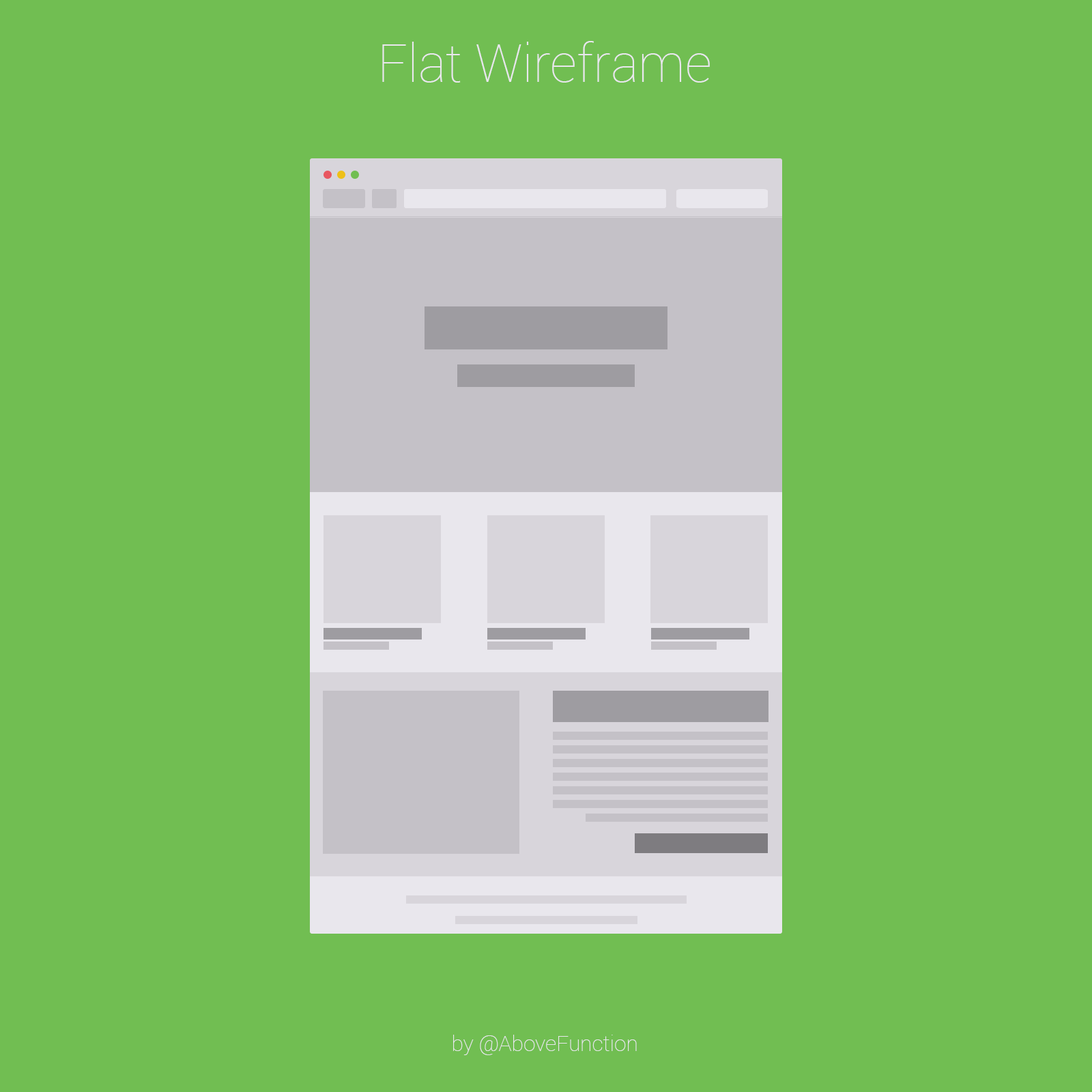
<style>
.page{position:relative;width:1092px;height:1092px;background:#71be52}
.page>*{position:absolute;margin:0}
.t1{font:52.5px "Roboto-Thin";color:#e9e7ed}
.t2{font:21.6px "Roboto-Thin";color:#e9e7ed}
</style>
<div class="page">
<p class="t1" style="left:382px;top:41px;width:328px;height:42px">Flat Wireframe</p>
<p class="t2" style="left:453px;top:1035px;width:184px;height:20px">by @AboveFunction</p>
</div>
